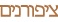
<style>
.page{position:relative;width:58px;height:22px;background:#ffffff}
.page>*{position:absolute;margin:0}
.t1{font:21.6px "MyriadHebrew-Regular";letter-spacing:-0.09em;color:#ad7344}
</style>
<div class="page">
<p class="t1" style="left:0px;top:4px;width:59px;height:13px">םינרופיצ</p>
</div>
